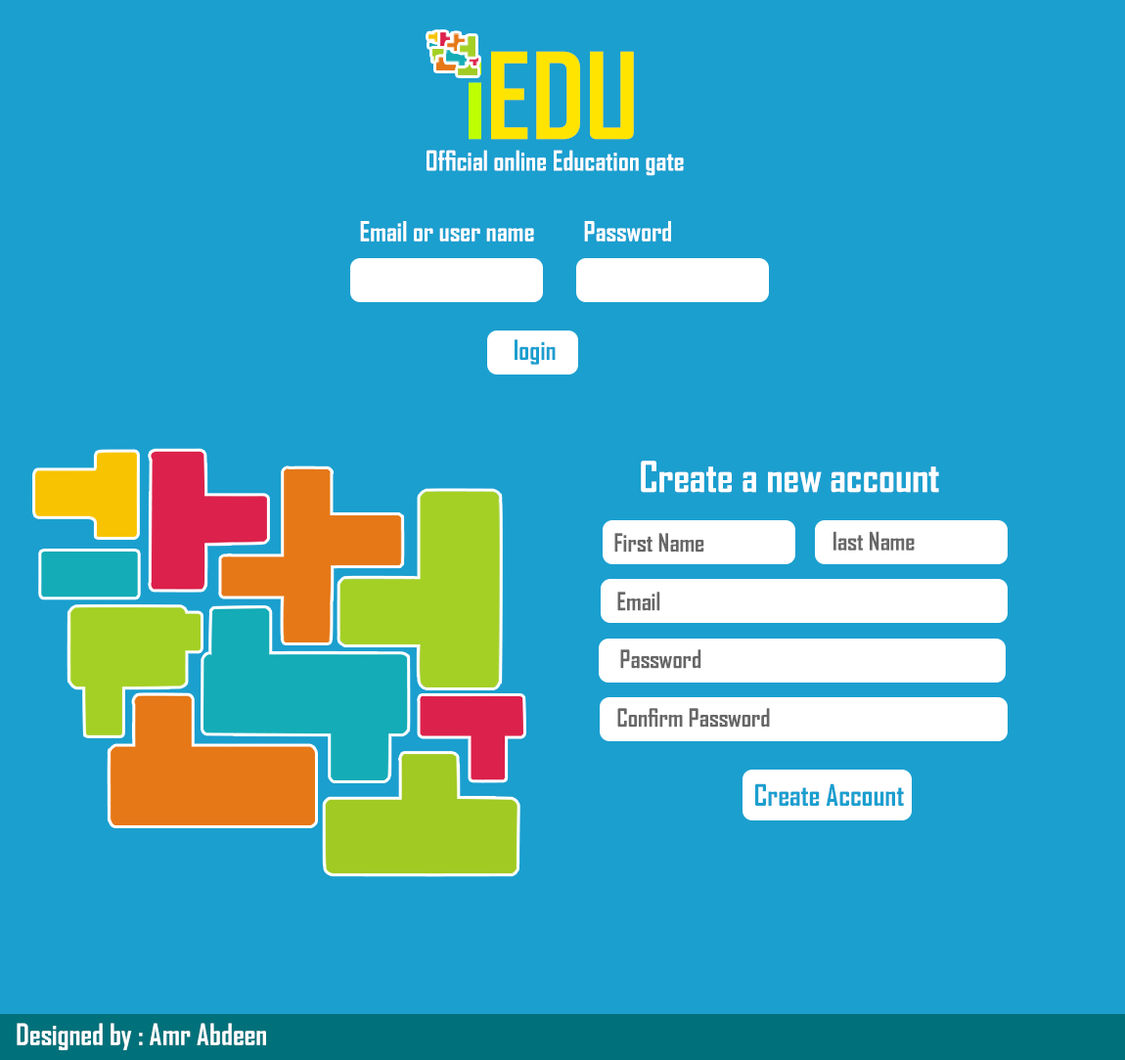
<style>
.page{position:relative;width:1125px;height:1060px;background:#1b9fcf}
.page>*{position:absolute;margin:0}
.t1{font:114.1px "AgencyFB-Bold";color:#ffe400}
.t2{font:114.1px "AgencyFB-Bold";color:#beff03}
.t3{font:26.5px "AgencyFB-Bold";color:#ffffff}
.t4{font:26.5px "AgencyFB-Bold";color:#1b9fcf}
.t5{font:40.8px "AgencyFB-Bold";color:#ffffff}
.t6{font:24.5px "AgencyFB-Bold";color:#676767}
.t7{font:28.5px "AgencyFB-Bold";color:#1b9fcf}
.t8{font:28.5px "AgencyFB-Bold";color:#ffffff}
</style>
<div class="page">
<p class="t1" style="left:468px;top:51px;width:166px;height:89px"><span class="t2">i</span>EDU</p>
<p class="t3" style="left:426px;top:150px;width:258px;height:26px">Official online Education gate</p>
<p class="t3" style="left:360px;top:221px;width:174px;height:21px">Email or user name</p>
<p class="t3" style="left:584px;top:221px;width:87px;height:21px">Password</p>
<p class="t4" style="left:514px;top:339px;width:42px;height:26px">login</p>
<p class="t5" style="left:641px;top:461px;width:298px;height:32px">Create a new account</p>
<p class="t6" style="left:614px;top:533px;width:90px;height:20px">First Name</p>
<p class="t6" style="left:833px;top:531px;width:81px;height:20px">last Name</p>
<p class="t6" style="left:617px;top:592px;width:43px;height:19px">Email</p>
<p class="t6" style="left:620px;top:649px;width:81px;height:20px">Password</p>
<p class="t6" style="left:617px;top:708px;width:153px;height:20px">Confirm Password</p>
<p class="t7" style="left:755px;top:783px;width:149px;height:23px">Create Account</p>
<p class="t8" style="left:17px;top:1023px;width:249px;height:27px">Designed by : Amr Abdeen</p>
</div>
